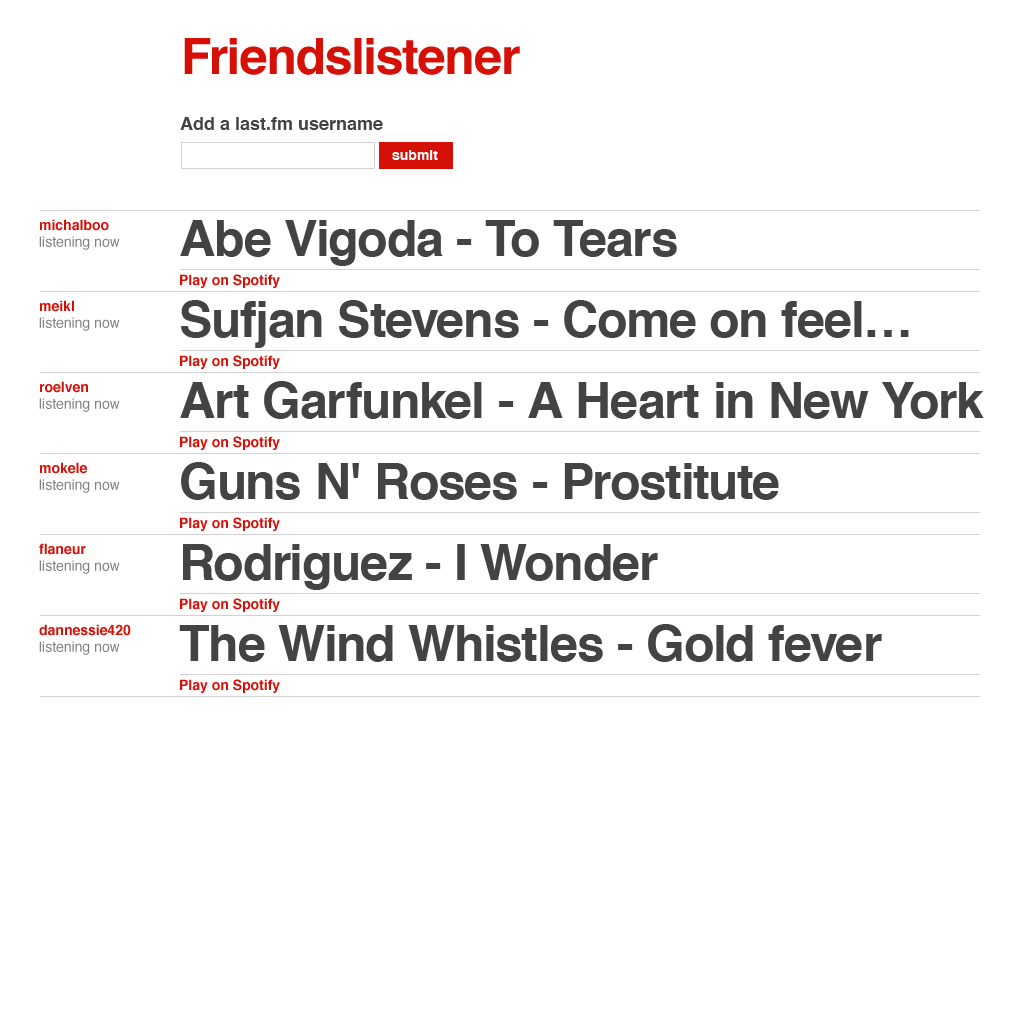
<style>
.page{position:relative;width:1020px;height:1020px;background:#ffffff}
.page>*{position:absolute;margin:0}
.t1{font:50px "Helvetica-Bold";letter-spacing:-0.015em;color:#d51007}
.t2{font:18px "Helvetica-Bold";color:#434343}
.t3{font:14px "Helvetica-Bold";color:#ffffff}
.t4{font:14px "Helvetica";color:#808080}
.t5{font:14px "Helvetica-Bold";color:#d51007}
.t6{font:50px "Helvetica-Bold";letter-spacing:-0.015em;color:#434343}
</style>
<div class="page">
<p class="t1" style="left:184px;top:38px;width:336px;height:37px">Friendslistener</p>
<p class="t2" style="left:180px;top:117px;width:203px;height:13px">Add a last.fm username</p>
<p class="t3" style="left:392px;top:150px;width:46px;height:10px">submit</p>
<p class="t4" style="left:39px;top:219px;width:81px;height:31px"><span class="t5">michalboo<br></span>listening now</p>
<p class="t6" style="left:180px;top:220px;width:497px;height:46px">Abe Vigoda - To Tears</p>
<p class="t5" style="left:180px;top:274px;width:100px;height:14px">Play on Spotify</p>
<p class="t4" style="left:39px;top:300px;width:81px;height:31px"><span class="t5">meikl<br></span>listening now</p>
<p class="t6" style="left:181px;top:300px;width:728px;height:48px">Sufjan Stevens - Come on feel…</p>
<p class="t5" style="left:180px;top:355px;width:100px;height:14px">Play on Spotify</p>
<p class="t4" style="left:39px;top:381px;width:81px;height:31px"><span class="t5">roelven<br></span>listening now</p>
<p class="t6" style="left:180px;top:381px;width:804px;height:38px">Art Garfunkel - A Heart in New York</p>
<p class="t5" style="left:180px;top:436px;width:100px;height:14px">Play on Spotify</p>
<p class="t4" style="left:39px;top:462px;width:81px;height:31px"><span class="t5">mokele<br></span>listening now</p>
<p class="t6" style="left:181px;top:462px;width:598px;height:38px">Guns N' Roses - Prostitute</p>
<p class="t5" style="left:180px;top:517px;width:100px;height:14px">Play on Spotify</p>
<p class="t4" style="left:39px;top:543px;width:81px;height:31px"><span class="t5">flaneur<br></span>listening now</p>
<p class="t6" style="left:183px;top:544px;width:475px;height:46px">Rodriguez - I Wonder</p>
<p class="t5" style="left:180px;top:598px;width:100px;height:14px">Play on Spotify</p>
<p class="t4" style="left:39px;top:624px;width:92px;height:31px"><span class="t5">dannessie420<br></span>listening now</p>
<p class="t6" style="left:179px;top:624px;width:703px;height:38px">The Wind Whistles - Gold fever</p>
<p class="t5" style="left:180px;top:679px;width:100px;height:14px">Play on Spotify</p>
</div>
